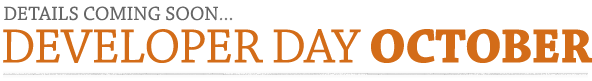
<style>
.page{position:relative;width:592px;height:81px;background:#ffffff}
.page>*{position:absolute;margin:0}
.t1{font:20.1px "ChaparralPro-Regular";color:#666666}
.t2{font:50.3px "ChaparralPro-Regular";letter-spacing:-0.02em;color:#d36c18}
.t3{font:50.3px "ChaparralPro-Bold";letter-spacing:-0.02em;color:#d36c18}
</style>
<div class="page">
<p class="t1" style="left:4px;top:6px;width:229px;height:15px">DETAILS COMING SOON...</p>
<p class="t2" style="left:3px;top:29px;width:589px;height:34px">DEVELOPER DAY <span class="t3">OCTOBER</span></p>
</div>
